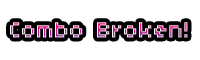
<style>
.page{position:relative;width:200px;height:60px;background:#ffffff}
.page>*{position:absolute;margin:0}
.t1{font:24px "04b03"}
</style>
<div class="page">
<p class="t1" style="left:10px;top:22px;width:178px;height:16px">Combo Broken!</p>
<p class="t1" style="left:10px;top:22px;width:178px;height:16px">Combo Broken!</p>
<p class="t1" style="left:10px;top:22px;width:178px;height:16px">Combo Broken!</p>
</div>
